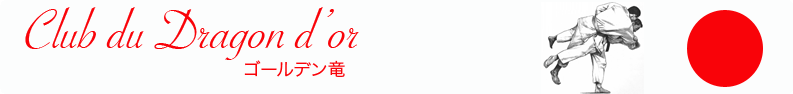
<style>
.page{position:relative;width:793px;height:94px;background:#fcfdfd}
.page>*{position:absolute;margin:0}
.t1{font:60px "SavoyeLetPlain";color:#f90309;font-style:italic}
.t2{font:18px "HiraKakuPro-W3";color:#f90309}
</style>
<div class="page">
<p class="t1" style="left:25px;top:7px;width:334px;height:53px">Club du Dragon d’or</p>
<p class="t2" style="left:244px;top:60px;width:101px;height:17px">ゴールデン竜</p>
</div>
